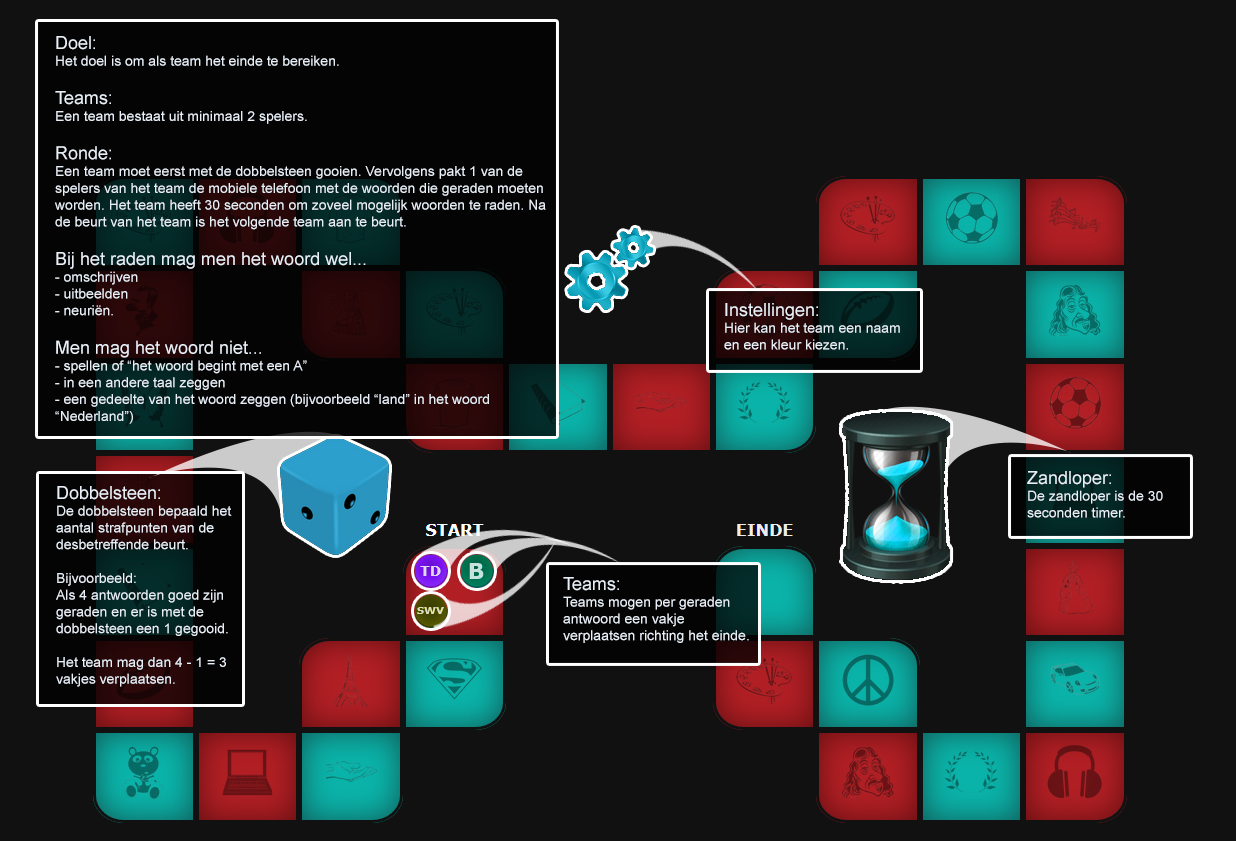
<style>
.page{position:relative;width:1236px;height:841px;background:#111111}
.page>*{position:absolute;margin:0}
.t1{font:14px "ArialMT";color:#e8eff7}
.t2{font:18px "ArialMT";color:#e8eff7}
</style>
<div class="page">
<p class="t1" style="left:55px;top:36px;width:491px;height:388px"><span class="t2">Doel:<br></span>Het doel is om als team het einde te bereiken.<br><br><span class="t2">Teams: <br></span>Een team bestaat uit minimaal 2 spelers.<br><br><span class="t2">Ronde: <br></span>Een team moet eerst met de dobbelsteen gooien. Vervolgens pakt 1 van de spelers van het team de mobiele telefoon met de woorden die geraden moeten worden. Het team heeft 30 seconden om zoveel mogelijk woorden te raden. Na de beurt van het team is het volgende team aan te beurt.<br><br><span class="t2">Bij het raden mag men het woord wel...<br></span>- omschrijven<br>- uitbeelden <br>- neuriën.<br><br><span class="t2">Men mag het woord niet...<br></span>- spellen of “het woord begint met een A”<br>- in een andere taal zeggen<br>- een gedeelte van het woord zeggen (bijvoorbeeld “land” in het woord “Nederland”)</p>
<p class="t1" style="left:724px;top:303px;width:176px;height:47px"><span class="t2">Instellingen:<br></span>Hier kan het team een naam en een kleur kiezen.</p>
<p class="t1" style="left:1027px;top:471px;width:136px;height:47px"><span class="t2">Zandloper:<br></span>De zandloper is de 30 seconden timer.</p>
<p class="t1" style="left:56px;top:486px;width:176px;height:201px"><span class="t2">Dobbelsteen:<br></span>De dobbelsteen bepaald het aantal strafpunten van de desbetreffende beurt. <br><br>Bijvoorbeeld:<br>Als 4 antwoorden goed zijn geraden en er is met de dobbelsteen een 1 gegooid.<br><br>Het team mag dan 4 - 1 = 3 vakjes verplaatsen.</p>
<p class="t1" style="left:563px;top:577px;width:186px;height:66px"><span class="t2">Teams:<br></span>Teams mogen per geraden antwoord een vakje verplaatsen richting het einde.</p>
</div>
